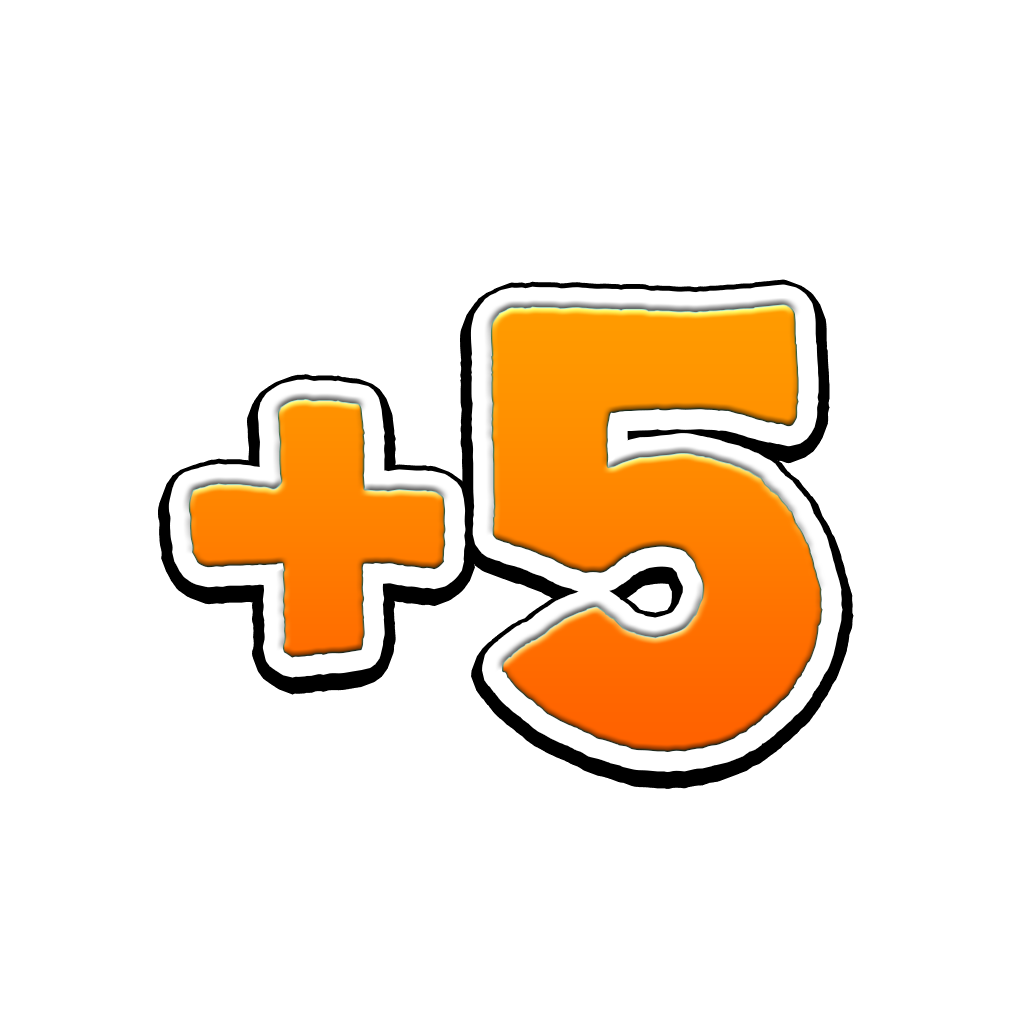
<style>
.page{position:relative;width:1024px;height:1024px;background:#ffffff}
.page>*{position:absolute;margin:0}
.t1{font:600px "Skranji-Bold";color:#ff8100}
</style>
<div class="page">
<p class="t1" style="left:188px;top:304px;width:635px;height:448px">+5</p>
</div>
